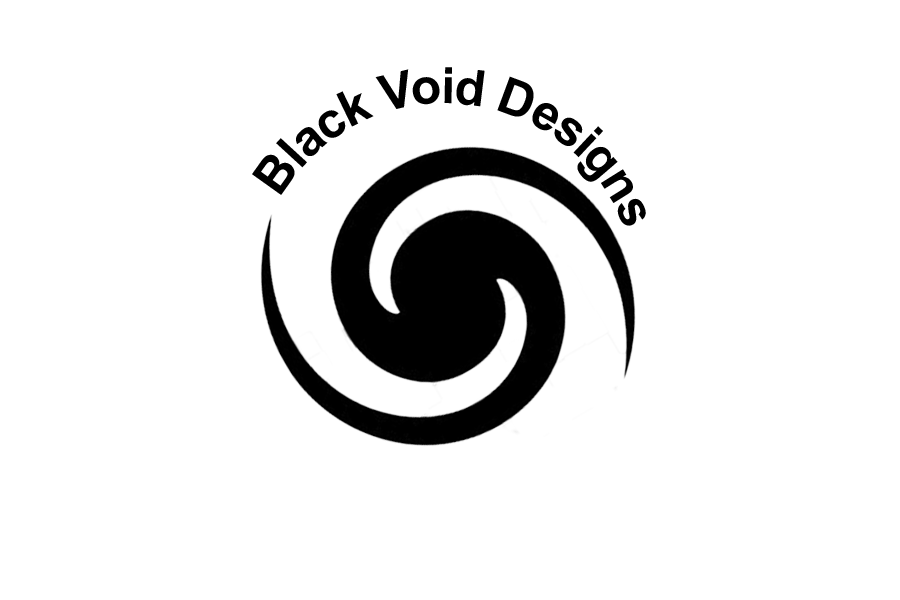
<style>
.page{position:relative;width:900px;height:600px;background:#ffffff}
.page>*{position:absolute;margin:0}
.t1{font:50px "Arial-BoldMT";letter-spacing:-0.03em;color:#000000}
</style>
<div class="page">
<p class="t1" style="left:252px;top:67px;width:394px;height:159px">Black Void Designs</p>
</div>
